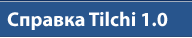
<style>
.page{position:relative;width:192px;height:38px;background:#28558d}
.page>*{position:absolute;margin:0}
.t1{font:20px "MyriadPro-Bold";color:#fefefe}
</style>
<div class="page">
<p class="t1" style="left:7px;top:11px;width:161px;height:19px">Справка Tilchi 1.0</p>
</div>
